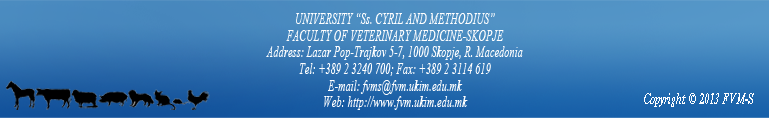
<style>
.page{position:relative;width:769px;height:118px}
.page>*{position:absolute;margin:0}
.t1{font:15.6px/16.7px "TimesNewRomanPS-ItalicMT";color:#ffffff;scale:0.67 1}
.t2{font:15.6px "TimesNewRomanPS-BoldItalicMT";color:#ffffff;scale:0.67 1}
</style>
<div class="page">
<p class="t1" style="left:266px;top:13px;width:257px;height:97px;text-align:center">UNIVERSITY “Ss. CYRIL AND METHODIUS”<br>FACULTY OF VETERINARY MEDICINE-SKOPJE<br>Address: Lazar Pop-Trajkov 5-7, 1000 Skopje, R. Macedonia<br>Tel: +389 2 3240 700; Fax: +389 2 3114 619<br>E-mail: fvms@fvm.ukim.edu.mk<br>Web: http://www.fvm.ukim.edu.mk</p>
<p class="t2" style="left:644px;top:93px;width:110px;height:14px">Copyright © 2013 FVM-S</p>
</div>
